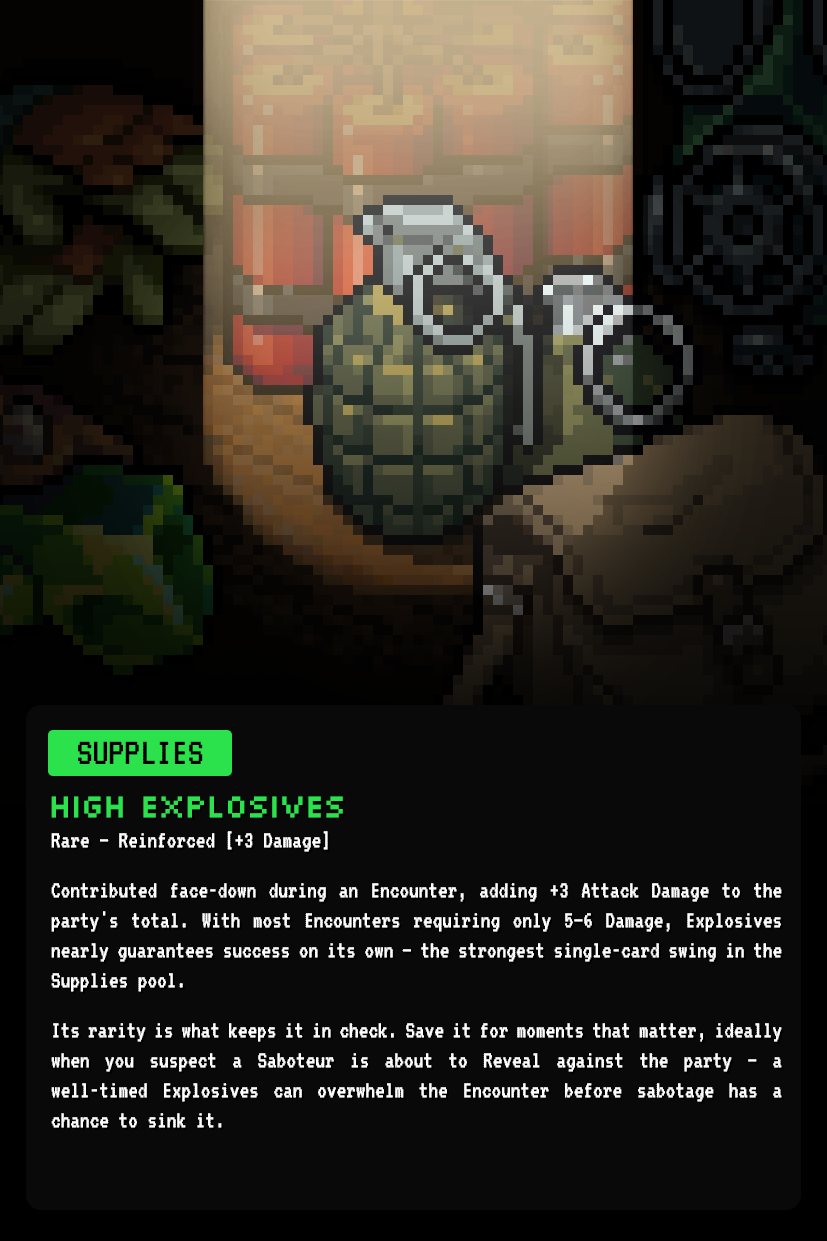
<style>
.page{position:relative;width:827px;height:1241px;background:#090909}
.page>*{position:absolute;margin:0}
.t1{font:39.7px "VT323-Regular";color:#000000}
.t2{font:25px "VT323-Regular";color:#ffffff;scale:0.96 1}
.t3{font:33.3px "Silkscreen-Regular";letter-spacing:-0.05em;color:#2be24d;scale:0.96 1}
</style>
<div class="page">
<p class="t1" style="left:78px;top:741px;width:125px;height:23px">SUPPLIES</p>
<p class="t2" style="left:51px;top:796px;width:731px;height:332px;text-align:justify"><span class="t3">HIGH EXPLOSIVES<br></span>Rare — Reinforced [+3 Damage]<br><br>Contributed face-down during an Encounter, adding +3 Attack Damage to the party's total. With most Encounters requiring only 5–6 Damage, Explosives nearly guarantees success on its own — the strongest single-card swing in the Supplies pool.<br><br>Its rarity is what keeps it in check. Save it for moments that matter, ideally when you suspect a Saboteur is about to Reveal against the party — a well-timed Explosives can overwhelm the Encounter before sabotage has a chance to sink it.</p>
</div>
